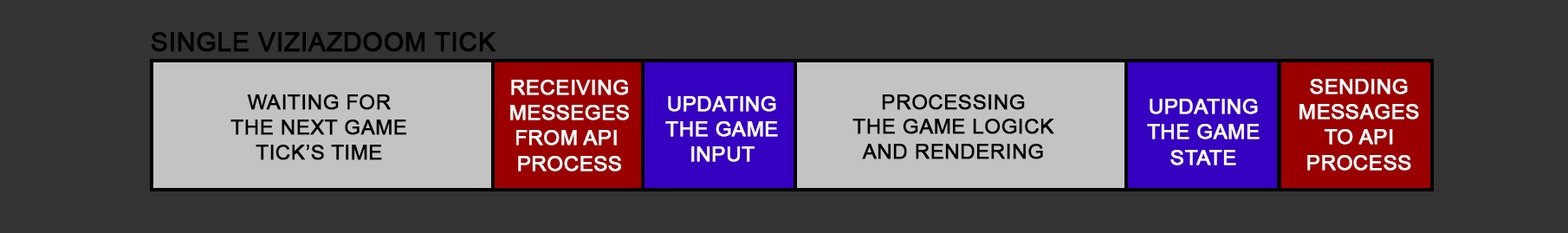
<style>
.page{position:relative;width:1568px;height:233px;background:#333333}
.page>*{position:absolute;margin:0}
.t1{font:20.8px/25.5px "ArialMT";color:#ffffff;text-transform:uppercase;font-weight:bold}
.t2{font:20.8px/25.5px "ArialMT";color:#000000;text-transform:uppercase;font-weight:bold}
.t3{font:20.8px "ArialMT";color:#000000;text-transform:uppercase;font-weight:bold}
</style>
<div class="page">
<p class="t1" style="left:510px;top:80px;width:119px;height:92px;text-align:center">RECEIVING<br>MESSEGES<br>FROM API <br>PROCESS</p>
<p class="t1" style="left:1299px;top:79px;width:120px;height:92px;text-align:center">SENDING<br>MESSAGES<br>TO API<br>PROCESS</p>
<p class="t2" style="left:230px;top:94px;width:176px;height:66px;text-align:center">Waiting FOR<br> THE NEXT GAME <br>TICK’S TIME</p>
<p class="t1" style="left:665px;top:96px;width:113px;height:66px;text-align:center">UPDATING<br>THE GAME<br>INPUT</p>
<p class="t3" style="left:852px;top:94px;width:202px;height:65px;text-align:center">PROCESSING<br>THE GAME LOGICK<br>AND RENDERING</p>
<p class="t1" style="left:1147px;top:99px;width:113px;height:66px;text-align:center">UPDATING<br>THE GAME<br>STATE</p>
</div>
